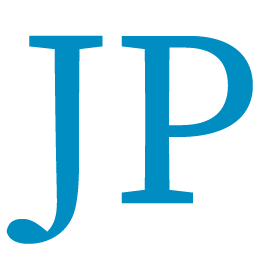
<style>
.page{position:relative;width:260px;height:260px;background:#ffffff}
.page>*{position:absolute;margin:0}
.t1{font:250px "SourceSerifPro-Regular";color:#008dc1}
</style>
<div class="page">
<p class="t1" style="left:6px;top:35px;width:247px;height:209px">JP</p>
</div>
